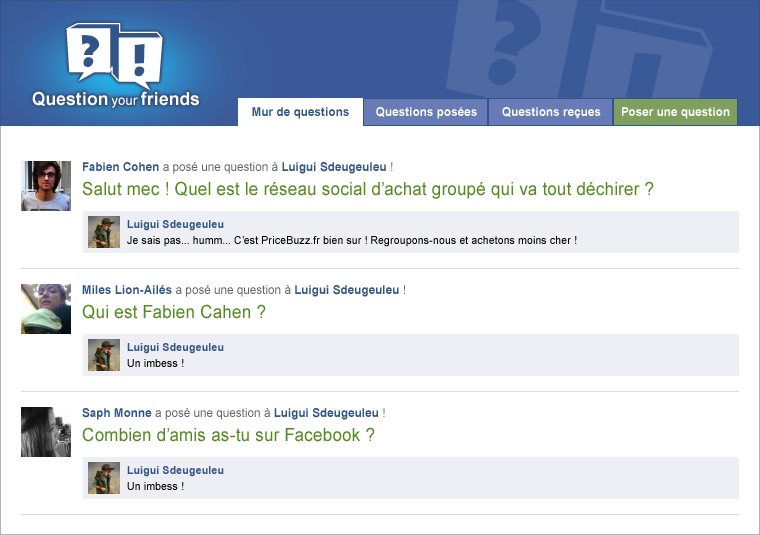
<style>
.page{position:relative;width:760px;height:535px;background:#ffffff}
.page>*{position:absolute;margin:0}
.t1{font:18px "Arial-BoldMT";letter-spacing:0.022em;color:#ffffff;scale:0.94 1}
.t2{font:14px "ArialMT";letter-spacing:0.022em;color:#ffffff;scale:0.94 1}
.t3{font:12px "Arial-BoldMT";letter-spacing:0.015em;color:#325587;scale:0.95 1}
.t4{font:12px "Arial-BoldMT";letter-spacing:0.015em;color:#ffffff;scale:0.95 1}
.t5{font:12px "ArialMT";letter-spacing:0.015em;color:#646464;scale:0.95 1}
.t6{font:18px "ArialMT";letter-spacing:0.015em;color:#558a22;scale:0.95 1}
.t7{font:11px/16px "ArialMT";letter-spacing:0.015em;color:#000000;scale:0.95 1}
.t8{font:11px/16px "Arial-BoldMT";letter-spacing:0.015em;color:#325587;scale:0.95 1}
</style>
<div class="page">
<p class="t1" style="left:32px;top:91px;width:167px;height:17px">Question <span class="t2">your </span>friends</p>
<p class="t3" style="left:252px;top:107px;width:97px;height:12px">Mur de questions</p>
<p class="t4" style="left:376px;top:107px;width:101px;height:12px">Questions posées</p>
<p class="t4" style="left:502px;top:107px;width:99px;height:12px">Questions reçues</p>
<p class="t4" style="left:622px;top:107px;width:108px;height:12px">Poser une question</p>
<p class="t5" style="left:83px;top:162px;width:310px;height:12px"><span class="t3">Fabien Cohen </span>a posé une question à <span class="t3">Luigui Sdeugeuleu</span> !</p>
<p class="t6" style="left:82px;top:181px;width:572px;height:18px">Salut mec ! Quel est le réseau social d’achat groupé qui va tout déchirer ?</p>
<p class="t7" style="left:127px;top:220px;width:450px;height:27px"><span class="t8">Luigui Sdeugeuleu<br></span>Je sais pas... humm... C’est PriceBuzz.fr bien sur ! Regroupons-nous et achetons moins cher !</p>
<p class="t5" style="left:82px;top:285px;width:323px;height:12px"><span class="t3">Miles Lion-Ailés </span>a posé une question à <span class="t3">Luigui Sdeugeuleu</span> !</p>
<p class="t6" style="left:82px;top:304px;width:184px;height:15px">Qui est Fabien Cahen ?</p>
<p class="t8" style="left:127px;top:343px;width:97px;height:24px">Luigui Sdeugeuleu<br><span class="t7">Un imbess !</span></p>
<p class="t5" style="left:82px;top:408px;width:303px;height:12px"><span class="t3">Saph Monne </span>a posé une question à <span class="t3">Luigui Sdeugeuleu</span> !</p>
<p class="t6" style="left:82px;top:427px;width:293px;height:15px">Combien d’amis as-tu sur Facebook ?</p>
<p class="t8" style="left:127px;top:466px;width:97px;height:24px">Luigui Sdeugeuleu<br><span class="t7">Un imbess !</span></p>
</div>
